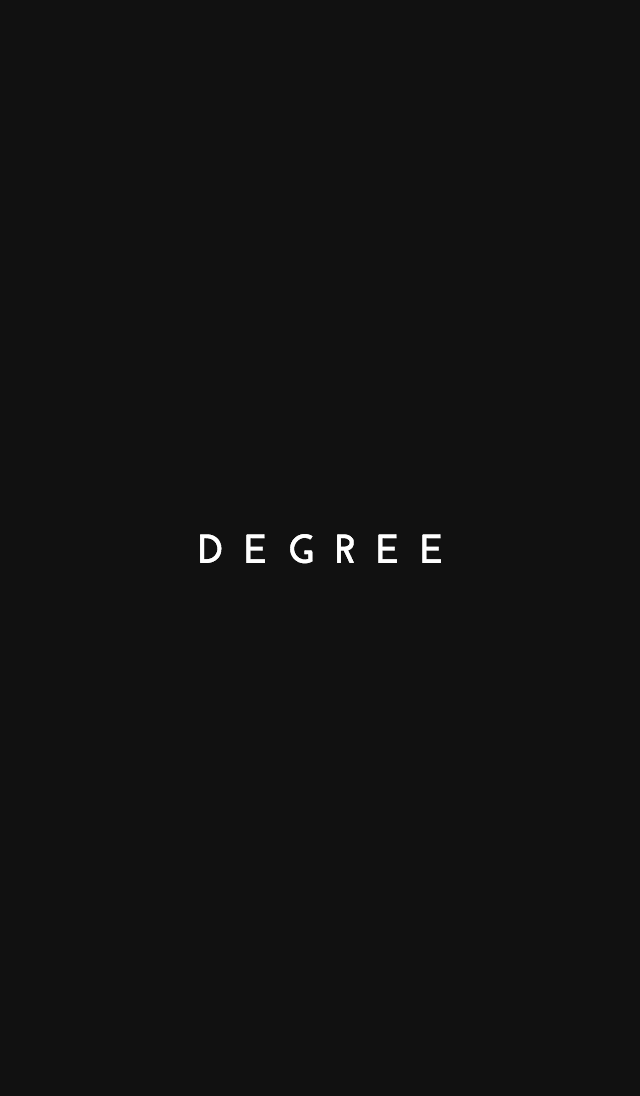
<style>
.page{position:relative;width:640px;height:1096px;background:#111111}
.page>*{position:absolute;margin:0}
.t1{font:40px "JosefinSans-Bold";letter-spacing:0.5em;color:#ffffff;text-transform:uppercase}
</style>
<div class="page">
<p class="t1" style="left:200px;top:534px;width:241px;height:30px">Degree</p>
</div>
